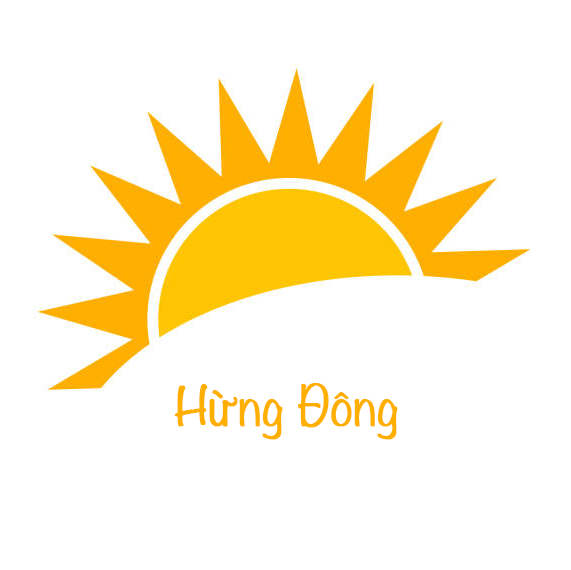
<style>
.page{position:relative;width:571px;height:570px;background:#ffffff}
.page>*{position:absolute;margin:0}
.t1{font:48px "Noteworthy-Light";color:#ffaf00;font-weight:bold}
</style>
<div class="page">
<p class="t1" style="left:174px;top:383px;width:224px;height:57px">Hừng Đông</p>
</div>
